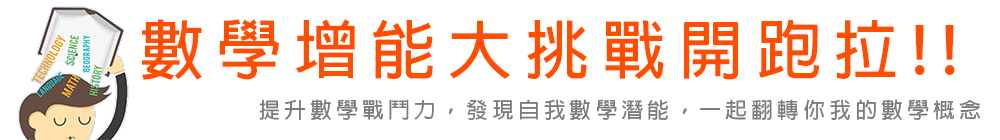
<style>
.page{position:relative;width:1000px;height:140px;background:#ffffff}
.page>*{position:absolute;margin:0}
.t1{font:64.2px "AdobeFanHeitiStd-Bold";letter-spacing:0.2em;color:#ff4e00}
.t2{font:21.6px "AdobeFanHeitiStd-Bold";letter-spacing:0.2em;color:#7b7b7b}
</style>
<div class="page">
<p class="t1" style="left:142px;top:19px;width:813px;height:61px">數學增能大挑戰開跑拉!!</p>
<p class="t2" style="left:259px;top:99px;width:722px;height:21px">提升數學戰鬥力，發現自我數學潛能，一起翻轉你我的數學概念</p>
</div>
